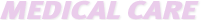
<style>
.page{position:relative;width:204px;height:20px;background:#eacceb}
.page>*{position:absolute;margin:0}
.t1{font:26px "MetaBlackC-Italic";color:#eacceb;text-transform:uppercase;scale:1.2 1}
</style>
<div class="page">
<p class="t1" style="left:0px;top:0px;width:199px;height:20px">MEDICAL CARE</p>
</div>
